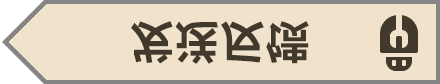
<style>
.page{position:relative;width:440px;height:84px;background:#f1e3cb}
.page>*{position:absolute;margin:0}
.t1{font:45px "HarmonyOS_Sans_SC_Bold";letter-spacing:0.005em;color:#41392b}
</style>
<div class="page">
<p class="t1" style="left:131px;top:21px;width:178px;height:43px">发送反馈</p>
</div>
